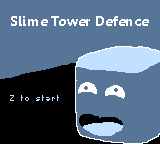
<style>
.page{position:relative;width:160px;height:144px;background:#577697}
.page>*{position:absolute;margin:0}
.t1{font:14px "Gisha-Bold";color:#ffffff}
.t2{font:8px "SFPixelate";color:#c2e0ff}
</style>
<div class="page">
<p class="t1" style="left:11px;top:16px;width:138px;height:10px">Slime Tower Defence</p>
<p class="t2" style="left:10px;top:95px;width:49px;height:6px">Z to start</p>
</div>
